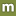
<style>
.page{position:relative;width:16px;height:16px;background:#7f8d3e}
.page>*{position:absolute;margin:0}
.t1{font:14px "HelveticaNeue-Bold";color:#ffffff}
</style>
<div class="page">
<p class="t1" style="left:2px;top:3px;width:12px;height:9px">m</p>
</div>
